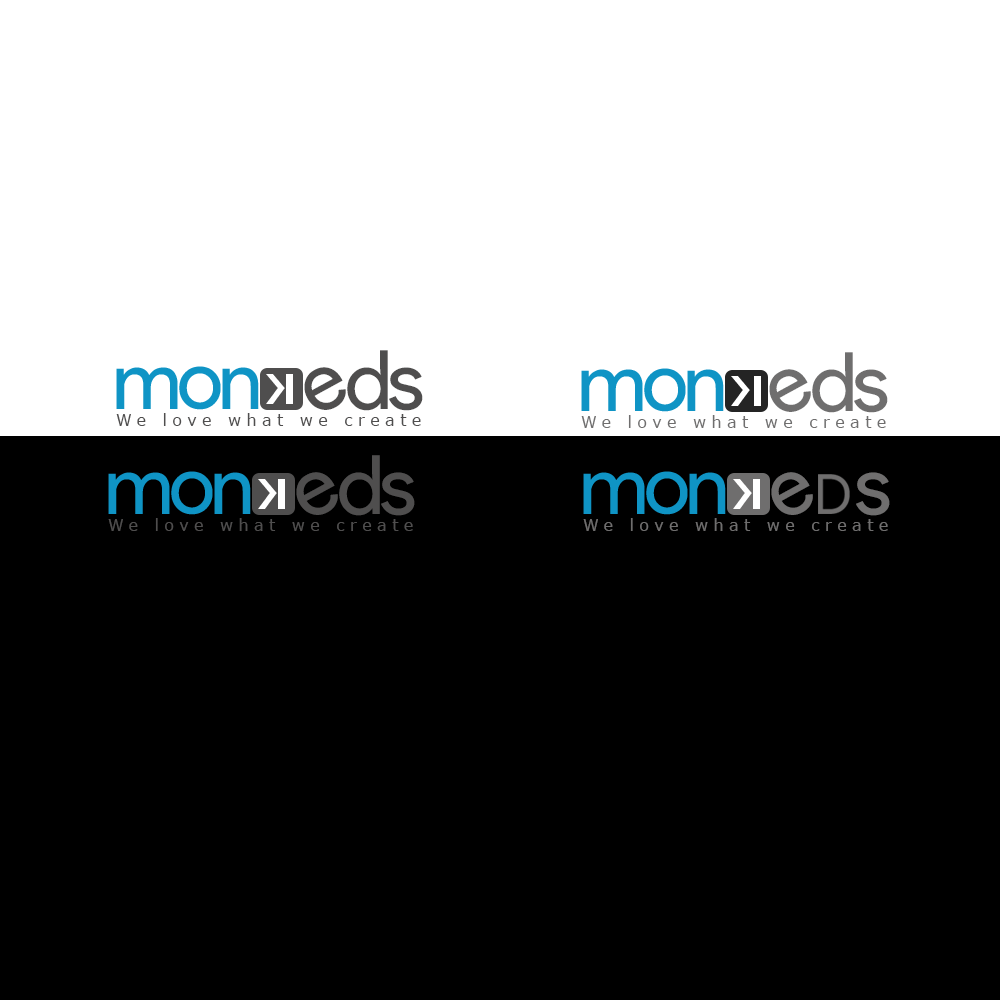
<style>
.page{position:relative;width:1000px;height:1000px;background:#000000}
.page>*{position:absolute;margin:0}
.t1{font:82px "ProductSans-Regular";letter-spacing:-0.04em;color:#4f4e4e}
.t2{font:82px "ProductSans-Regular";letter-spacing:-0.04em;color:#6f6e6e}
.t3{font:42.9px "MacType";letter-spacing:-0.055em;color:#ffffff}
.t4{font:42.9px "MacType";letter-spacing:0.025em;color:#ffffff}
.t5{font:16px "Verdana";letter-spacing:0.338em;color:#4f4e4e}
.t6{font:16px "Verdana";letter-spacing:0.338em;color:#6f6e6e}
</style>
<div class="page">
<p class="t1" style="left:347px;top:350px;width:41px;height:61px">d</p>
<p class="t2" style="left:812px;top:352px;width:41px;height:61px">d</p>
<p class="t3" style="left:266px;top:374px;width:27px;height:30px">&gt;I</p>
<p class="t1" style="left:304px;top:367px;width:42px;height:43px;rotate:-29deg">e</p>
<p class="t1" style="left:389px;top:367px;width:34px;height:44px">s</p>
<p class="t4" style="left:731px;top:376px;width:30px;height:30px">&gt;I</p>
<p class="t2" style="left:769px;top:369px;width:42px;height:43px;rotate:-29deg">e</p>
<p class="t2" style="left:854px;top:369px;width:34px;height:44px">s</p>
<p class="t5" style="left:116px;top:413px;width:305px;height:13px">We love what we create</p>
<p class="t6" style="left:581px;top:415px;width:305px;height:13px">We love what we create</p>
<p class="t1" style="left:339px;top:455px;width:41px;height:61px">d</p>
<p class="t1" style="left:296px;top:472px;width:42px;height:43px;rotate:-29deg">e</p>
<p class="t1" style="left:381px;top:472px;width:34px;height:44px">s</p>
<p class="t2" style="left:771px;top:472px;width:42px;height:43px;rotate:-29deg">e</p>
<p class="t2" style="left:856px;top:472px;width:34px;height:44px">s</p>
<p class="t3" style="left:258px;top:479px;width:27px;height:30px">&gt;I</p>
<p class="t3" style="left:733px;top:479px;width:27px;height:30px">&gt;I</p>
<p class="t5" style="left:108px;top:518px;width:305px;height:13px">We love what we create</p>
<p class="t6" style="left:583px;top:518px;width:305px;height:13px">We love what we create</p>
</div>
